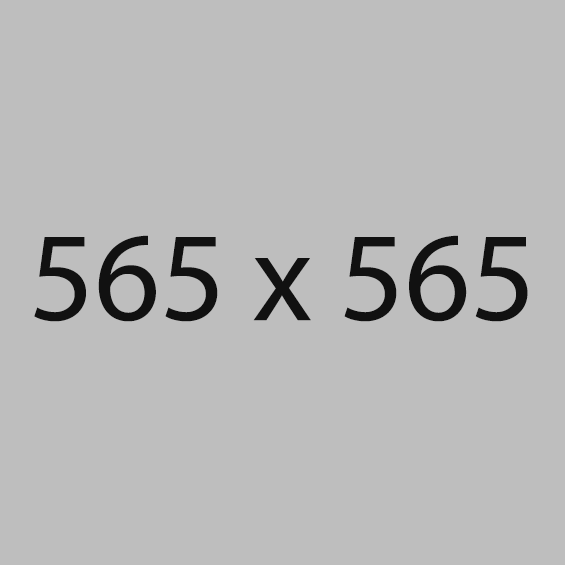
<style>
.page{position:relative;width:565px;height:565px;background:#bebebe}
.page>*{position:absolute;margin:0}
.t1{font:127.9px "MyriadPro-Regular";color:#111111}
</style>
<div class="page">
<p class="t1" style="left:34px;top:235px;width:494px;height:87px">565 x 565</p>
</div>
